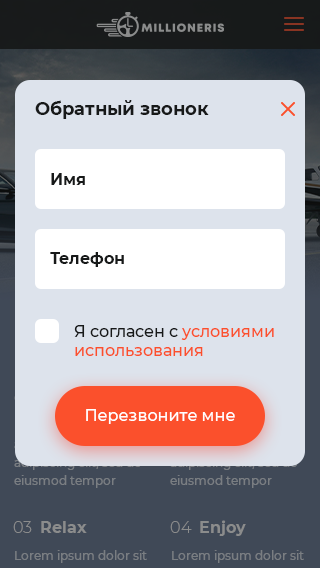
<style>
.page{position:relative;width:320px;height:568px;background:#dde3ec}
.page>*{position:absolute;margin:0}
.t1{font:18px "Montserrat-Bold";color:#171919}
.t2{font:16px "Montserrat-Bold";color:#171919}
.t3{font:16px "Montserrat-Medium";color:#fb502c}
.t4{font:16px "Montserrat-Medium";color:#171919}
.t5{font:16px "Montserrat-Medium";color:#ffffff}
</style>
<div class="page">
<p class="t1" style="left:35px;top:100px;width:174px;height:19px">Обратный звонок</p>
<p class="t2" style="left:51px;top:173px;width:34px;height:12px">Имя</p>
<p class="t2" style="left:50px;top:252px;width:74px;height:15px">Телефон</p>
<p class="t3" style="left:74px;top:325px;width:200px;height:31px"><span class="t4">Я согласен с </span>условиями<br>использования</p>
<p class="t5" style="left:86px;top:409px;width:149px;height:15px">Перезвоните мне</p>
</div>
